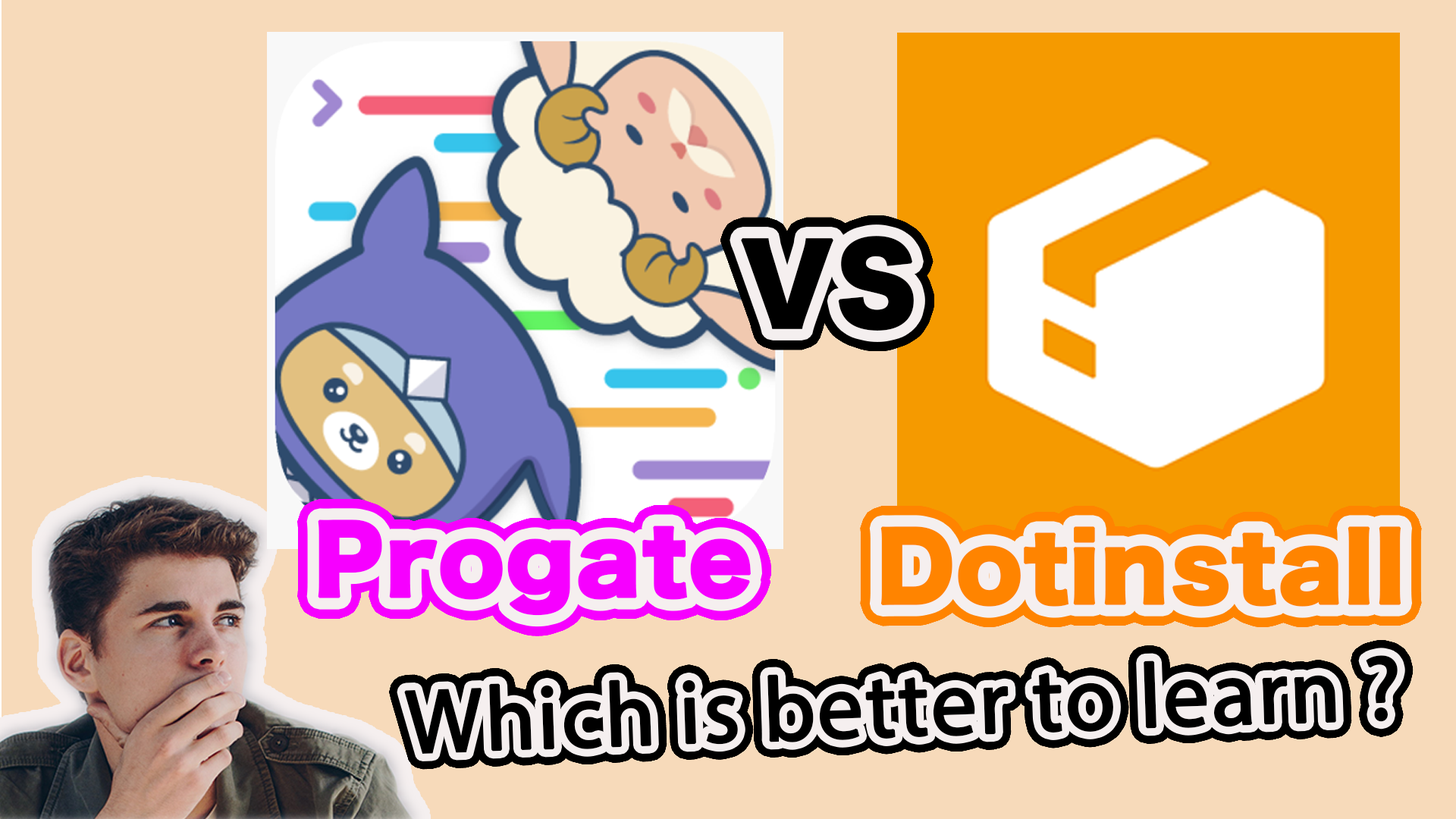
<style>
.page{position:relative;width:1456px;height:819px;background:#f7daba}
.page>*{position:absolute;margin:0}
.t1{font:106.2px "HiraKakuStd-W8";color:#000000;font-weight:bold}
.t2{font:91px "HiraKakuStd-W8";color:#f600ff;font-weight:bold}
.t3{font:91px "HiraKakuStd-W8";color:#ff8400;font-weight:bold}
.t4{font:91px "MyriadPro-Regular";color:#000000;font-weight:bold}
</style>
<div class="page">
<p class="t1" style="left:741px;top:236px;width:173px;height:95px">VS</p>
<p class="t2" style="left:318px;top:519px;width:433px;height:97px">Progate</p>
<p class="t3" style="left:880px;top:526px;width:521px;height:81px">Dotinstall</p>
<p class="t4" style="left:404px;top:655px;width:994px;height:99px;rotate:-2deg">Which is better to learn ?</p>
</div>
